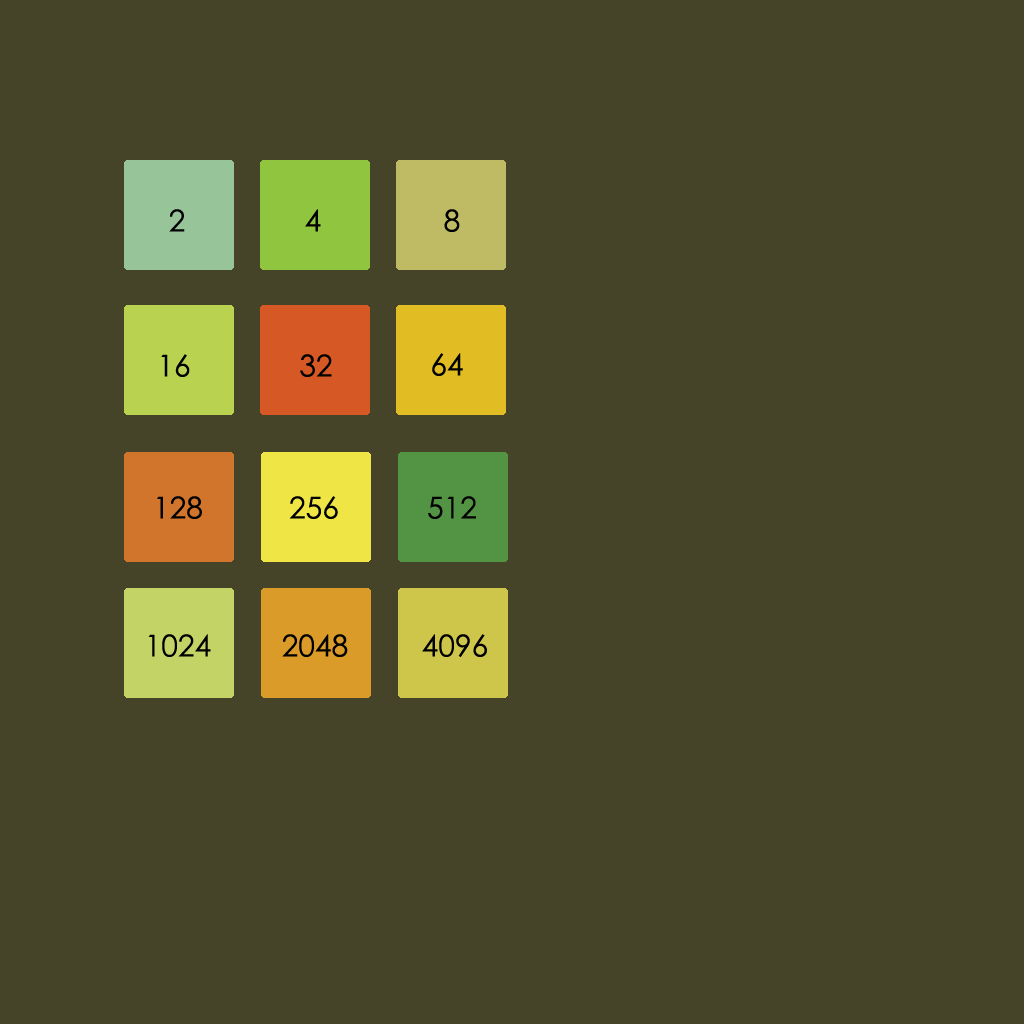
<style>
.page{position:relative;width:1024px;height:1024px;background:#454428}
.page>*{position:absolute;margin:0}
.t1{font:30px "STXihei";color:#000000}
</style>
<div class="page">
<p class="t1" style="left:169px;top:209px;width:16px;height:23px">2</p>
<p class="t1" style="left:305px;top:209px;width:16px;height:23px">4</p>
<p class="t1" style="left:444px;top:209px;width:16px;height:23px">8</p>
<p class="t1" style="left:432px;top:353px;width:31px;height:23px">64</p>
<p class="t1" style="left:161px;top:354px;width:29px;height:23px">16</p>
<p class="t1" style="left:300px;top:354px;width:32px;height:23px">32</p>
<p class="t1" style="left:157px;top:496px;width:45px;height:23px">128</p>
<p class="t1" style="left:289px;top:496px;width:49px;height:23px">256</p>
<p class="t1" style="left:428px;top:496px;width:48px;height:23px">512</p>
<p class="t1" style="left:148px;top:634px;width:63px;height:23px">1024</p>
<p class="t1" style="left:282px;top:634px;width:66px;height:23px">2048</p>
<p class="t1" style="left:422px;top:634px;width:65px;height:23px">4096</p>
</div>
